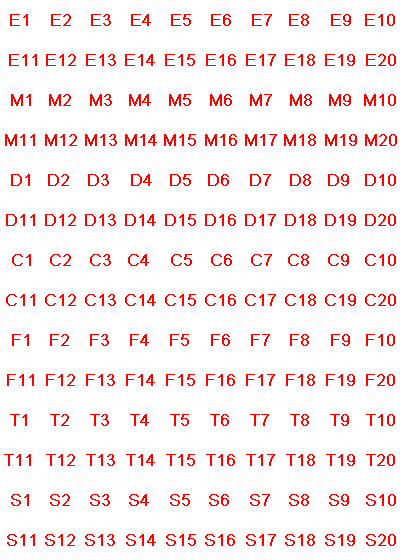
<style>
.page{position:relative;width:400px;height:560px;background:#ffffff}
.page>*{position:absolute;margin:0}
.t1{font:16.6px "ArialMT";color:#ff0000;font-weight:bold}
</style>
<div class="page">
<p class="t1" style="left:10px;top:14px;width:18px;height:12px">E1</p>
<p class="t1" style="left:51px;top:14px;width:20px;height:12px">E2</p>
<p class="t1" style="left:91px;top:14px;width:20px;height:12px">E3</p>
<p class="t1" style="left:131px;top:14px;width:20px;height:12px">E4</p>
<p class="t1" style="left:171px;top:14px;width:20px;height:12px">E5</p>
<p class="t1" style="left:211px;top:14px;width:20px;height:12px">E6</p>
<p class="t1" style="left:252px;top:14px;width:20px;height:12px">E7</p>
<p class="t1" style="left:289px;top:14px;width:20px;height:12px">E8</p>
<p class="t1" style="left:331px;top:14px;width:20px;height:12px">E9</p>
<p class="t1" style="left:365px;top:14px;width:30px;height:12px">E10</p>
<p class="t1" style="left:9px;top:54px;width:28px;height:12px">E11</p>
<p class="t1" style="left:46px;top:54px;width:30px;height:12px">E12</p>
<p class="t1" style="left:86px;top:54px;width:30px;height:12px">E13</p>
<p class="t1" style="left:125px;top:54px;width:30px;height:12px">E14</p>
<p class="t1" style="left:165px;top:54px;width:30px;height:12px">E15</p>
<p class="t1" style="left:206px;top:54px;width:30px;height:12px">E16</p>
<p class="t1" style="left:246px;top:54px;width:30px;height:12px">E17</p>
<p class="t1" style="left:285px;top:54px;width:30px;height:12px">E18</p>
<p class="t1" style="left:325px;top:54px;width:30px;height:12px">E19</p>
<p class="t1" style="left:366px;top:54px;width:30px;height:12px">E20</p>
<p class="t1" style="left:11px;top:94px;width:20px;height:12px">M1</p>
<p class="t1" style="left:49px;top:94px;width:22px;height:12px">M2</p>
<p class="t1" style="left:90px;top:94px;width:22px;height:12px">M3</p>
<p class="t1" style="left:129px;top:94px;width:22px;height:12px">M4</p>
<p class="t1" style="left:169px;top:94px;width:22px;height:12px">M5</p>
<p class="t1" style="left:210px;top:94px;width:22px;height:12px">M6</p>
<p class="t1" style="left:250px;top:94px;width:22px;height:12px">M7</p>
<p class="t1" style="left:290px;top:94px;width:22px;height:12px">M8</p>
<p class="t1" style="left:329px;top:94px;width:22px;height:12px">M9</p>
<p class="t1" style="left:364px;top:94px;width:32px;height:12px">M10</p>
<p class="t1" style="left:5px;top:134px;width:30px;height:12px">M11</p>
<p class="t1" style="left:45px;top:134px;width:32px;height:12px">M12</p>
<p class="t1" style="left:85px;top:134px;width:32px;height:12px">M13</p>
<p class="t1" style="left:125px;top:134px;width:32px;height:12px">M14</p>
<p class="t1" style="left:164px;top:134px;width:32px;height:12px">M15</p>
<p class="t1" style="left:205px;top:134px;width:32px;height:12px">M16</p>
<p class="t1" style="left:245px;top:134px;width:32px;height:12px">M17</p>
<p class="t1" style="left:284px;top:134px;width:32px;height:12px">M18</p>
<p class="t1" style="left:325px;top:134px;width:32px;height:12px">M19</p>
<p class="t1" style="left:365px;top:134px;width:32px;height:12px">M20</p>
<p class="t1" style="left:11px;top:174px;width:19px;height:12px">D1</p>
<p class="t1" style="left:48px;top:174px;width:21px;height:12px">D2</p>
<p class="t1" style="left:88px;top:174px;width:21px;height:12px">D3</p>
<p class="t1" style="left:131px;top:174px;width:21px;height:12px">D4</p>
<p class="t1" style="left:170px;top:174px;width:21px;height:12px">D5</p>
<p class="t1" style="left:208px;top:174px;width:21px;height:12px">D6</p>
<p class="t1" style="left:250px;top:174px;width:21px;height:12px">D7</p>
<p class="t1" style="left:290px;top:174px;width:21px;height:12px">D8</p>
<p class="t1" style="left:328px;top:174px;width:21px;height:12px">D9</p>
<p class="t1" style="left:365px;top:174px;width:31px;height:12px">D10</p>
<p class="t1" style="left:6px;top:214px;width:29px;height:12px">D11</p>
<p class="t1" style="left:45px;top:214px;width:31px;height:12px">D12</p>
<p class="t1" style="left:85px;top:214px;width:31px;height:12px">D13</p>
<p class="t1" style="left:125px;top:214px;width:31px;height:12px">D14</p>
<p class="t1" style="left:165px;top:214px;width:31px;height:12px">D15</p>
<p class="t1" style="left:205px;top:214px;width:31px;height:12px">D16</p>
<p class="t1" style="left:245px;top:214px;width:31px;height:12px">D17</p>
<p class="t1" style="left:285px;top:214px;width:31px;height:12px">D18</p>
<p class="t1" style="left:325px;top:214px;width:31px;height:12px">D19</p>
<p class="t1" style="left:365px;top:214px;width:31px;height:12px">D20</p>
<p class="t1" style="left:12px;top:254px;width:19px;height:12px">C1</p>
<p class="t1" style="left:50px;top:254px;width:21px;height:12px">C2</p>
<p class="t1" style="left:90px;top:254px;width:21px;height:12px">C3</p>
<p class="t1" style="left:128px;top:254px;width:21px;height:12px">C4</p>
<p class="t1" style="left:171px;top:254px;width:21px;height:12px">C5</p>
<p class="t1" style="left:211px;top:254px;width:21px;height:12px">C6</p>
<p class="t1" style="left:251px;top:254px;width:21px;height:12px">C7</p>
<p class="t1" style="left:288px;top:254px;width:21px;height:12px">C8</p>
<p class="t1" style="left:328px;top:254px;width:21px;height:12px">C9</p>
<p class="t1" style="left:365px;top:254px;width:31px;height:12px">C10</p>
<p class="t1" style="left:6px;top:294px;width:29px;height:12px">C11</p>
<p class="t1" style="left:45px;top:294px;width:31px;height:12px">C12</p>
<p class="t1" style="left:85px;top:294px;width:31px;height:12px">C13</p>
<p class="t1" style="left:125px;top:294px;width:31px;height:12px">C14</p>
<p class="t1" style="left:165px;top:294px;width:31px;height:12px">C15</p>
<p class="t1" style="left:205px;top:294px;width:31px;height:12px">C16</p>
<p class="t1" style="left:245px;top:294px;width:31px;height:12px">C17</p>
<p class="t1" style="left:285px;top:294px;width:31px;height:12px">C18</p>
<p class="t1" style="left:325px;top:294px;width:31px;height:12px">C19</p>
<p class="t1" style="left:365px;top:294px;width:31px;height:12px">C20</p>
<p class="t1" style="left:12px;top:334px;width:17px;height:12px">F1</p>
<p class="t1" style="left:50px;top:334px;width:19px;height:12px">F2</p>
<p class="t1" style="left:90px;top:334px;width:19px;height:12px">F3</p>
<p class="t1" style="left:130px;top:334px;width:19px;height:12px">F4</p>
<p class="t1" style="left:170px;top:334px;width:19px;height:12px">F5</p>
<p class="t1" style="left:211px;top:334px;width:19px;height:12px">F6</p>
<p class="t1" style="left:251px;top:334px;width:19px;height:12px">F7</p>
<p class="t1" style="left:290px;top:334px;width:19px;height:12px">F8</p>
<p class="t1" style="left:331px;top:334px;width:19px;height:12px">F9</p>
<p class="t1" style="left:366px;top:334px;width:29px;height:12px">F10</p>
<p class="t1" style="left:7px;top:374px;width:27px;height:12px">F11</p>
<p class="t1" style="left:46px;top:374px;width:29px;height:12px">F12</p>
<p class="t1" style="left:86px;top:374px;width:29px;height:12px">F13</p>
<p class="t1" style="left:126px;top:374px;width:29px;height:12px">F14</p>
<p class="t1" style="left:166px;top:374px;width:29px;height:12px">F15</p>
<p class="t1" style="left:206px;top:374px;width:29px;height:12px">F16</p>
<p class="t1" style="left:246px;top:374px;width:29px;height:12px">F17</p>
<p class="t1" style="left:286px;top:374px;width:29px;height:12px">F18</p>
<p class="t1" style="left:326px;top:374px;width:29px;height:12px">F19</p>
<p class="t1" style="left:366px;top:374px;width:29px;height:12px">F20</p>
<p class="t1" style="left:10px;top:414px;width:17px;height:12px">T1</p>
<p class="t1" style="left:50px;top:414px;width:19px;height:12px">T2</p>
<p class="t1" style="left:90px;top:414px;width:19px;height:12px">T3</p>
<p class="t1" style="left:130px;top:414px;width:19px;height:12px">T4</p>
<p class="t1" style="left:170px;top:414px;width:19px;height:12px">T5</p>
<p class="t1" style="left:210px;top:414px;width:19px;height:12px">T6</p>
<p class="t1" style="left:250px;top:414px;width:19px;height:12px">T7</p>
<p class="t1" style="left:290px;top:414px;width:19px;height:12px">T8</p>
<p class="t1" style="left:330px;top:414px;width:19px;height:12px">T9</p>
<p class="t1" style="left:366px;top:414px;width:29px;height:12px">T10</p>
<p class="t1" style="left:4px;top:454px;width:27px;height:12px">T11</p>
<p class="t1" style="left:46px;top:454px;width:29px;height:12px">T12</p>
<p class="t1" style="left:86px;top:454px;width:29px;height:12px">T13</p>
<p class="t1" style="left:126px;top:454px;width:29px;height:12px">T14</p>
<p class="t1" style="left:166px;top:454px;width:29px;height:12px">T15</p>
<p class="t1" style="left:206px;top:454px;width:29px;height:12px">T16</p>
<p class="t1" style="left:246px;top:454px;width:29px;height:12px">T17</p>
<p class="t1" style="left:286px;top:454px;width:29px;height:12px">T18</p>
<p class="t1" style="left:326px;top:454px;width:29px;height:12px">T19</p>
<p class="t1" style="left:366px;top:454px;width:29px;height:12px">T20</p>
<p class="t1" style="left:11px;top:494px;width:18px;height:12px">S1</p>
<p class="t1" style="left:50px;top:494px;width:20px;height:12px">S2</p>
<p class="t1" style="left:90px;top:494px;width:20px;height:12px">S3</p>
<p class="t1" style="left:129px;top:494px;width:20px;height:12px">S4</p>
<p class="t1" style="left:170px;top:494px;width:20px;height:12px">S5</p>
<p class="t1" style="left:209px;top:494px;width:20px;height:12px">S6</p>
<p class="t1" style="left:250px;top:494px;width:20px;height:12px">S7</p>
<p class="t1" style="left:289px;top:494px;width:20px;height:12px">S8</p>
<p class="t1" style="left:329px;top:494px;width:20px;height:12px">S9</p>
<p class="t1" style="left:366px;top:494px;width:30px;height:12px">S10</p>
<p class="t1" style="left:7px;top:534px;width:28px;height:12px">S11</p>
<p class="t1" style="left:45px;top:534px;width:30px;height:12px">S12</p>
<p class="t1" style="left:85px;top:534px;width:30px;height:12px">S13</p>
<p class="t1" style="left:126px;top:534px;width:30px;height:12px">S14</p>
<p class="t1" style="left:166px;top:534px;width:30px;height:12px">S15</p>
<p class="t1" style="left:205px;top:534px;width:30px;height:12px">S16</p>
<p class="t1" style="left:246px;top:534px;width:30px;height:12px">S17</p>
<p class="t1" style="left:285px;top:534px;width:30px;height:12px">S18</p>
<p class="t1" style="left:325px;top:534px;width:30px;height:12px">S19</p>
<p class="t1" style="left:366px;top:534px;width:30px;height:12px">S20</p>
</div>
